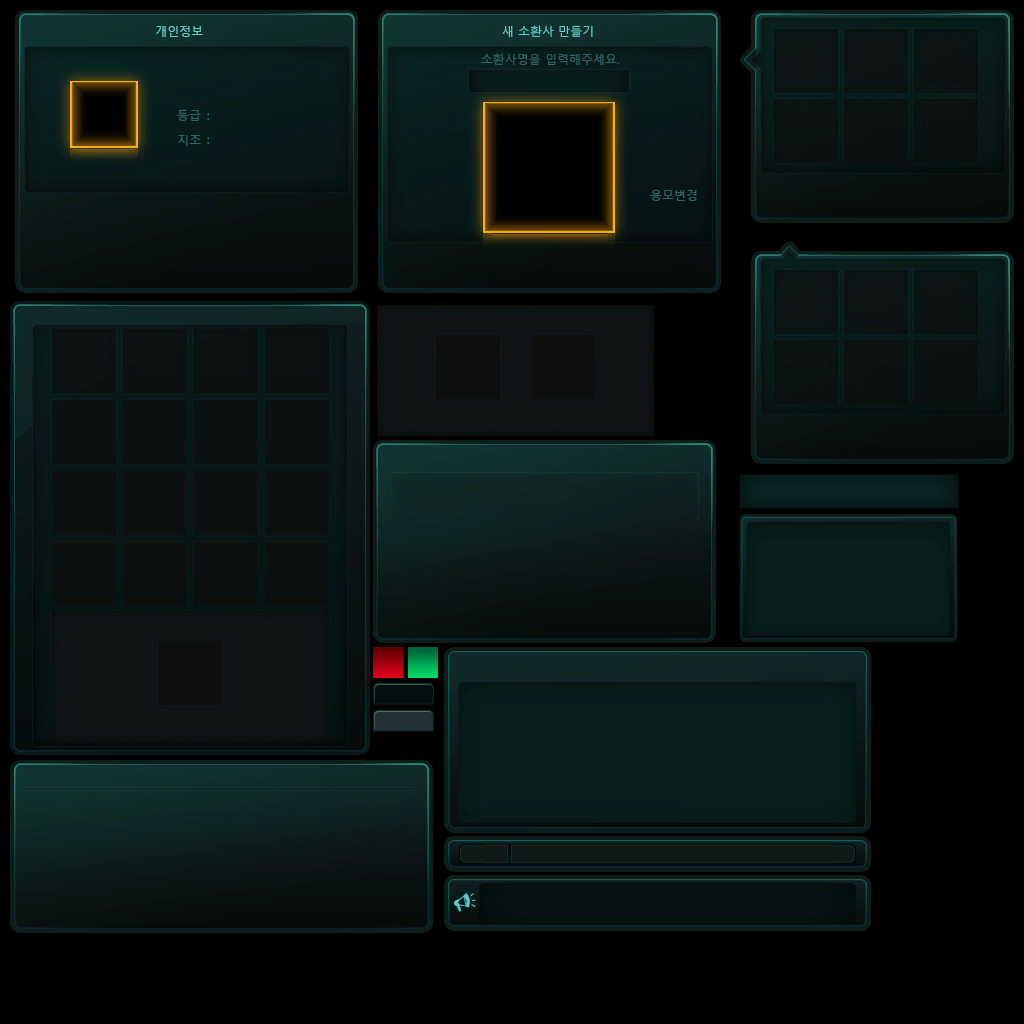
<style>
.page{position:relative;width:1024px;height:1024px;background:#000000}
.page>*{position:absolute;margin:0}
.t1{font:12px "MalgunGothicRegular";color:#63cbc6}
.t2{font:12px "MalgunGothicRegular";color:#316163}
.t3{font:12px "MalgunGothicRegular";color:#316563}
</style>
<div class="page">
<p class="t1" style="left:156px;top:26px;width:47px;height:11px">개인정보</p>
<p class="t1" style="left:502px;top:25px;width:91px;height:12px">새 소환사 만들기</p>
<p class="t2" style="left:481px;top:53px;width:138px;height:12px">소환사명을 입력해주세요.</p>
<p class="t3" style="left:177px;top:109px;width:24px;height:12px">등급</p>
<p class="t3" style="left:178px;top:135px;width:23px;height:11px">지조</p>
<p class="t3" style="left:650px;top:189px;width:47px;height:12px">용모변경</p>
</div>
